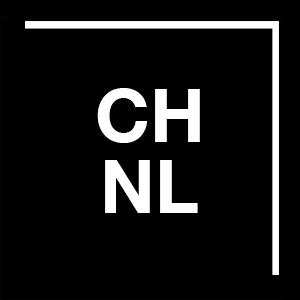
<style>
.page{position:relative;width:300px;height:300px;background:#000000}
.page>*{position:absolute;margin:0}
.t1{font:73.9px/70.4px "HelveticaNeue-Bold";color:#ffffff}
</style>
<div class="page">
<p class="t1" style="left:97px;top:88px;width:103px;height:125px;text-align:center">CH<br>NL</p>
</div>
